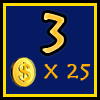
<style>
.page{position:relative;width:100px;height:100px;background:#061963}
.page>*{position:absolute;margin:0}
.t1{font:60px "Herculanum";font-weight:bold}
.t2{font:24px "Herculanum";color:#ffae00;font-weight:bold}
</style>
<div class="page">
<p class="t1" style="left:42px;top:13px;width:23px;height:40px">3</p>
<p class="t2" style="left:44px;top:64px;width:47px;height:17px">x 25</p>
</div>
